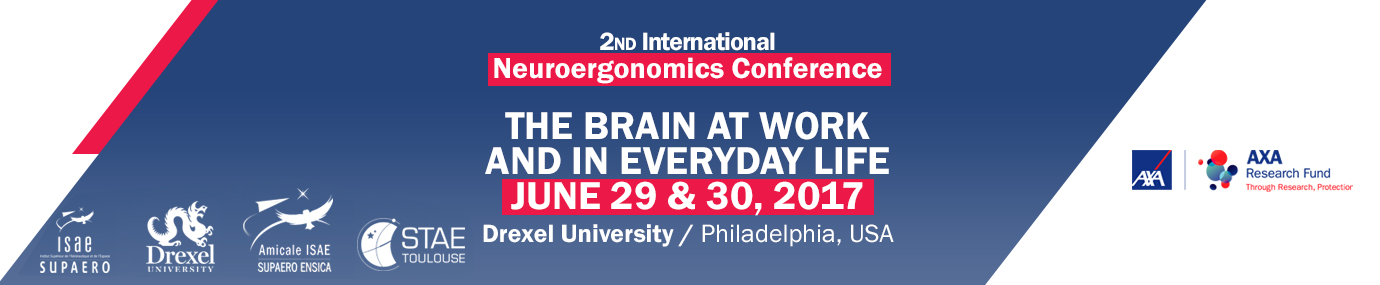
<style>
.page{position:relative;width:1380px;height:285px;background:#ffffff}
.page>*{position:absolute;margin:0}
.t1{font:40px/22.5px "FranklinGothicFS-Demi";color:#ffffff}
.t2{font:26px/15px "FranklinGothicFS-Demi";letter-spacing:-0.04em;color:#ffffff}
.t3{font:26px/15px "FranklinGothicFS-Demi";letter-spacing:-0.04em;color:#ffffff;font-variant:small-caps}
.t4{font:30px/15px "FranklinGothicFS-Demi";color:#ffffff}
.t5{font:26px/20px "FranklinGothicFS-Demi";color:#ffffff}
.t6{font:26px/20px "FranklinGothic-Book";color:#ffffff}
</style>
<div class="page">
<p class="t1" style="left:483px;top:32px;width:411px;height:215px;text-align:center"><span class="t2">2</span><span class="t3">nd</span><span class="t2"> International<br></span><span class="t4">Neuroergonomics Conference<br><br></span>THE BRAIN AT WORK<br>AND IN EVERYDAY LIFE<br>JUNE 29 &amp; 30, 2017<br><span class="t5">Drexel University / </span><span class="t6">Philadelphia, USA</span></p>
</div>
